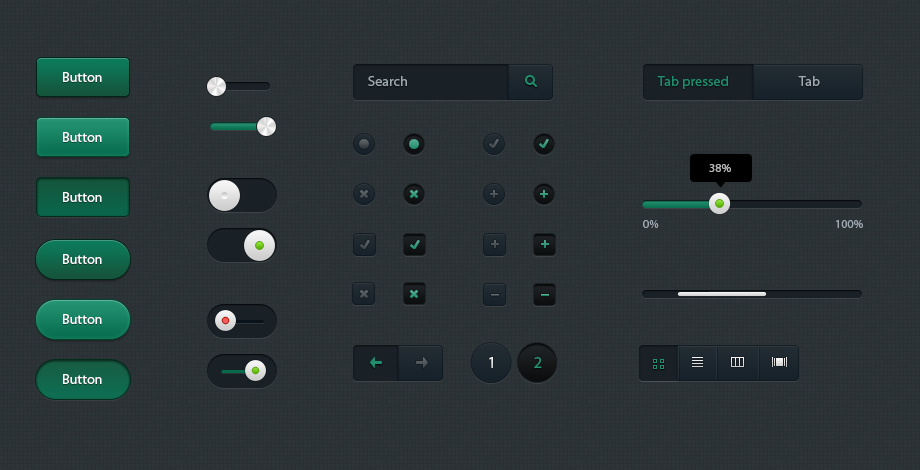
<style>
.page{position:relative;width:920px;height:470px;background:#2a3135}
.page>*{position:absolute;margin:0}
.t1{font:14px "MyriadPro-Regular";letter-spacing:0.01em;color:#fefefe}
.t2{font:14px "MyriadPro-Regular";letter-spacing:0.01em;color:#9ea9b1}
.t3{font:14px "MyriadPro-Regular";letter-spacing:0.01em;color:#208e6d}
.t4{font:12px "MyriadPro-Regular";letter-spacing:0.01em;color:#b8b8b8}
.t5{font:12px "MyriadPro-Regular";letter-spacing:0.01em;color:#9ea9b1}
.t6{font:16px "MyriadPro-Regular";letter-spacing:0.01em;color:#e6e6e6}
.t7{font:16px "MyriadPro-Regular";letter-spacing:0.01em;color:#249372}
</style>
<div class="page">
<p class="t1" style="left:63px;top:72px;width:39px;height:10px">Button</p>
<p class="t2" style="left:368px;top:76px;width:39px;height:10px">Search</p>
<p class="t3" style="left:657px;top:76px;width:71px;height:13px">Tab pressed</p>
<p class="t2" style="left:798px;top:76px;width:22px;height:10px">Tab</p>
<p class="t1" style="left:63px;top:132px;width:39px;height:10px">Button</p>
<p class="t4" style="left:709px;top:164px;width:22px;height:8px">38%</p>
<p class="t1" style="left:63px;top:192px;width:39px;height:10px">Button</p>
<p class="t5" style="left:643px;top:220px;width:16px;height:8px">0%</p>
<p class="t5" style="left:836px;top:220px;width:27px;height:8px">100%</p>
<p class="t1" style="left:63px;top:254px;width:39px;height:10px">Button</p>
<p class="t1" style="left:63px;top:314px;width:39px;height:10px">Button</p>
<p class="t6" style="left:489px;top:357px;width:4px;height:11px">1</p>
<p class="t7" style="left:534px;top:357px;width:8px;height:11px">2</p>
<p class="t1" style="left:63px;top:374px;width:39px;height:10px">Button</p>
</div>
